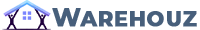
<style>
.page{position:relative;width:200px;height:30px;background:#ffffff}
.page>*{position:absolute;margin:0}
.t1{font:24.8px "Montserrat-Bold";color:#475f7b;font-variant:small-caps;font-weight:bold}
</style>
<div class="page">
<p class="t1" style="left:52px;top:8px;width:145px;height:19px">Warehouz</p>
</div>
